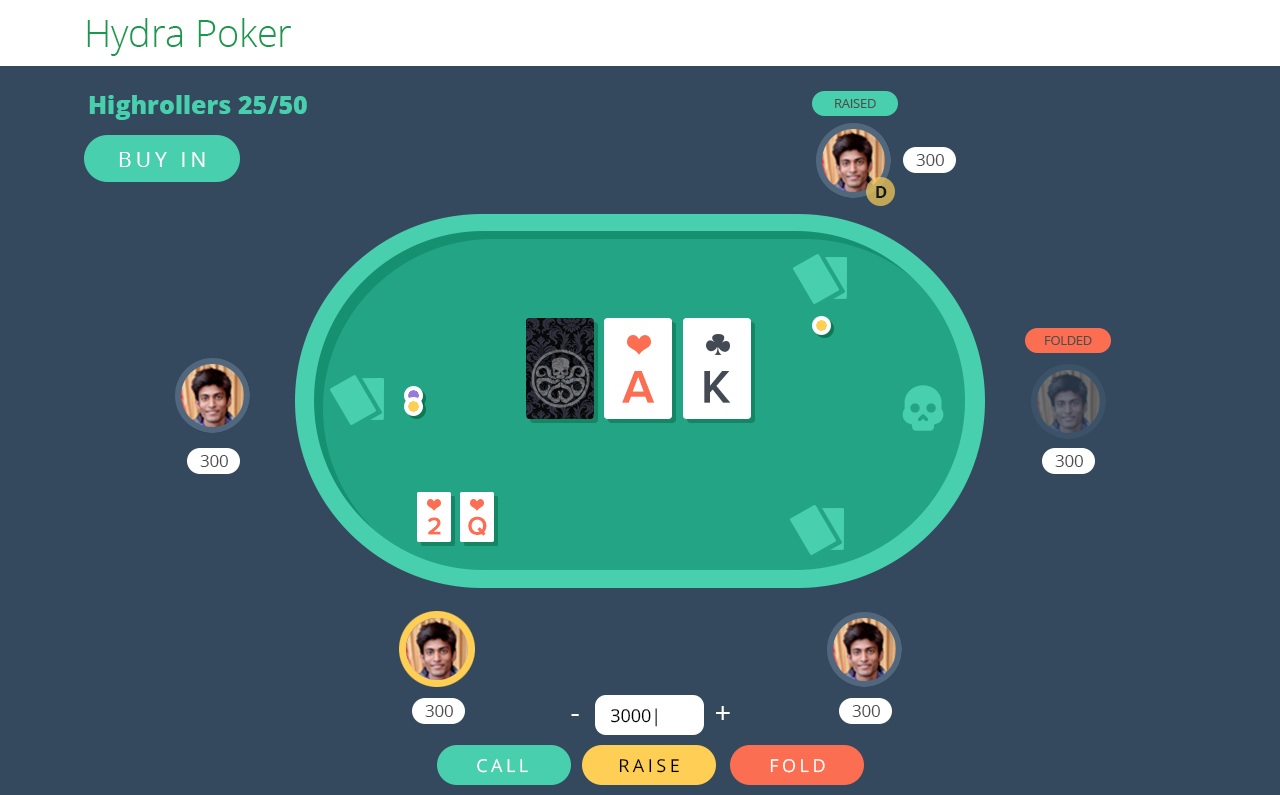
<style>
.page{position:relative;width:1280px;height:795px;background:#34495e}
.page>*{position:absolute;margin:0}
.t1{font:37.5px "OpenSans-Light";color:#17994e}
.t2{font:25px "OpenSans-Extrabold";color:#48cfad}
.t3{font:12.5px "OpenSans";color:#4e4e4e;text-transform:uppercase}
.t4{font:20.8px "OpenSans";letter-spacing:0.2em;color:#ffffff;text-transform:uppercase}
.t5{font:16.7px "OpenSans";color:#4e4e4e;text-transform:uppercase}
.t6{font:16.7px "OpenSans-Bold";color:#0f161c;text-transform:uppercase}
.t7{font:17.7px "OpenSans";color:#000000;text-transform:uppercase}
.t8{font:29.2px "OpenSans";color:#ffffff;text-transform:uppercase}
.t9{font:17.7px "OpenSans";letter-spacing:0.2em;color:#ffffff;text-transform:uppercase}
.t10{font:17.7px "OpenSans";letter-spacing:0.2em;color:#000000;text-transform:uppercase}
</style>
<div class="page">
<p class="t1" style="left:87px;top:18px;width:204px;height:38px">Hydra Poker</p>
<p class="t2" style="left:89px;top:95px;width:218px;height:25px">Highrollers 25/50</p>
<p class="t3" style="left:835px;top:99px;width:41px;height:9px">Raised</p>
<p class="t4" style="left:119px;top:152px;width:86px;height:15px">Buy in</p>
<p class="t5" style="left:916px;top:154px;width:28px;height:12px">300</p>
<p class="t6" style="left:876px;top:186px;width:11px;height:12px">D</p>
<p class="t3" style="left:1045px;top:336px;width:47px;height:9px">folded</p>
<p class="t5" style="left:200px;top:455px;width:28px;height:12px">300</p>
<p class="t5" style="left:1055px;top:455px;width:28px;height:12px">300</p>
<p class="t5" style="left:425px;top:705px;width:28px;height:12px">300</p>
<p class="t7" style="left:611px;top:708px;width:46px;height:19px">3000|</p>
<p class="t8" style="left:716px;top:706px;width:14px;height:14px">+</p>
<p class="t5" style="left:852px;top:705px;width:28px;height:12px">300</p>
<p class="t8" style="left:571px;top:714px;width:8px;height:2px">-</p>
<p class="t9" style="left:477px;top:759px;width:51px;height:14px">CALL</p>
<p class="t10" style="left:619px;top:759px;width:60px;height:14px">RAISE</p>
<p class="t9" style="left:770px;top:759px;width:55px;height:14px">FOLD</p>
</div>
